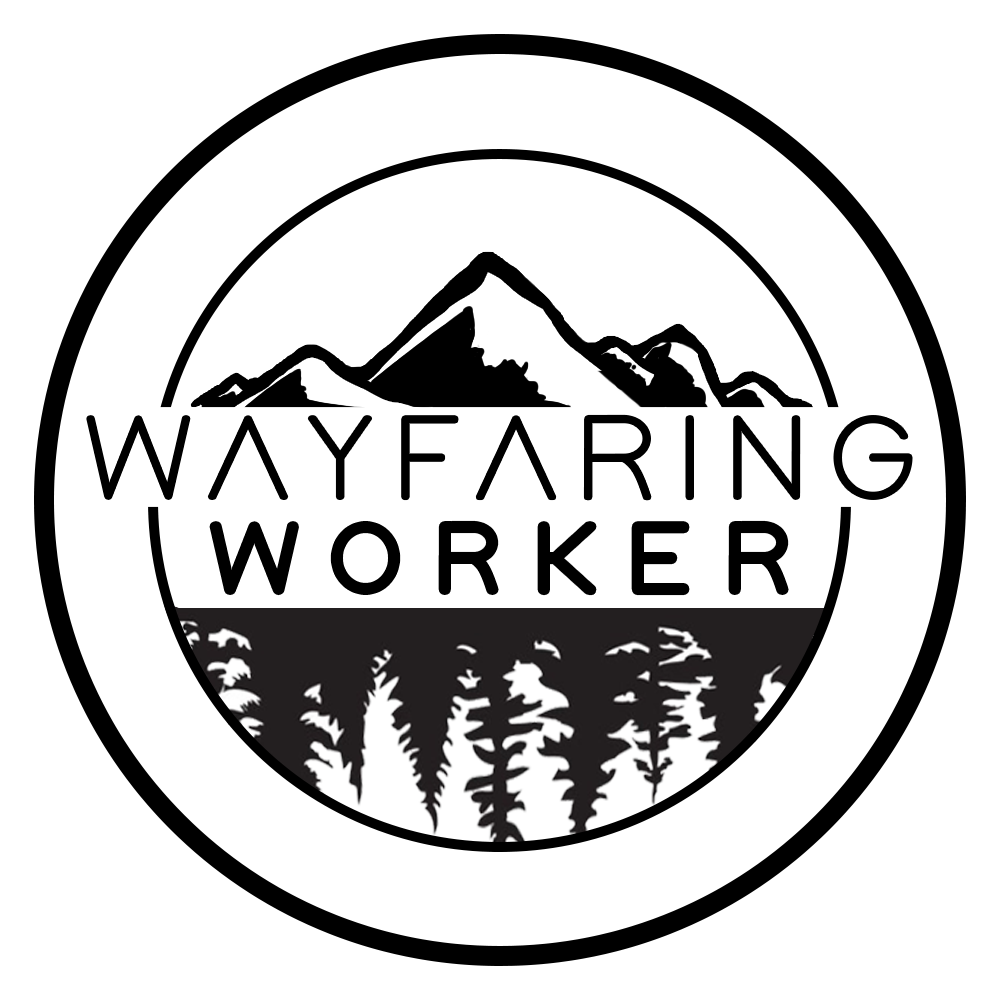
<style>
.page{position:relative;width:1000px;height:1000px;background:#ffffff}
.page>*{position:absolute;margin:0}
.t1{font:115.9px "Adam";letter-spacing:0.16em;color:#000000;scale:1.05 1}
.t2{font:93.6px "Adam";letter-spacing:0.34em;color:#000000;scale:1.05 1}
</style>
<div class="page">
<p class="t1" style="left:89px;top:417px;width:821px;height:81px">WAYFARING</p>
<p class="t2" style="left:214px;top:525px;width:570px;height:66px">WORKER</p>
</div>
